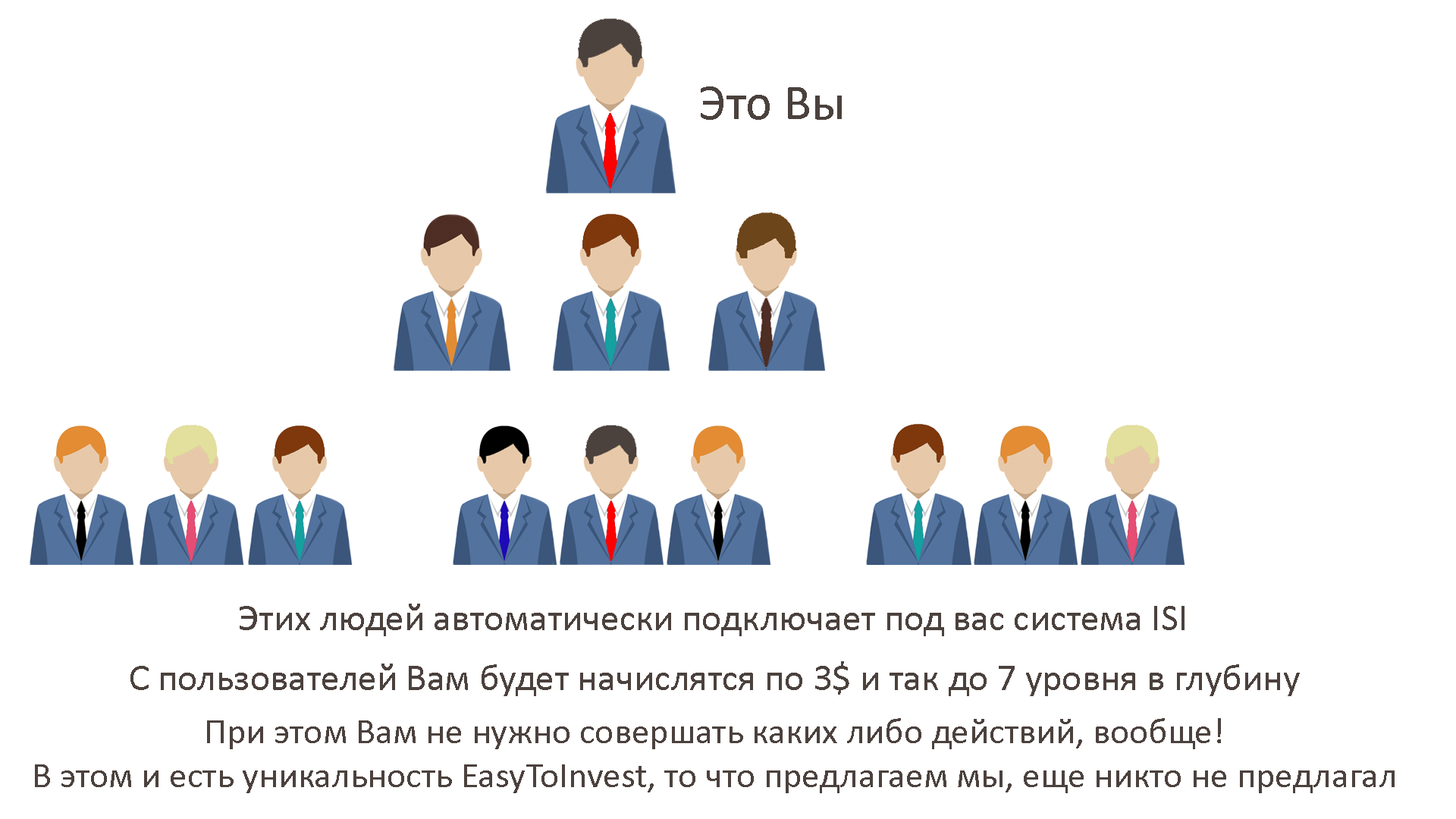
<style>
.page{position:relative;width:1456px;height:819px;background:#ffffff}
.page>*{position:absolute;margin:0}
.t1{font:50.8px "Calibri";color:#4b413d}
.t2{font:37.9px "Calibri";color:#4b413d}
.t3{font:36.4px "Calibri";color:#4b413d}
</style>
<div class="page">
<p class="t1" style="left:701px;top:86px;width:141px;height:34px">Это Вы</p>
<p class="t2" style="left:240px;top:604px;width:945px;height:32px">Этих людей автоматически подключает под вас система ISI</p>
<p class="t2" style="left:130px;top:661px;width:1170px;height:35px">С пользователей Вам будет начислятся по 3$ и так до 7 уровня в глубину</p>
<p class="t3" style="left:35px;top:718px;width:1360px;height:75px;text-align:center">При этом Вам не нужно совершать каких либо действий, вообще!<br>В этом и есть уникальность EasyToInvest, то что предлагаем мы, еще никто не предлагал</p>
</div>
